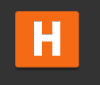
<style>
.page{position:relative;width:100px;height:85px;background:#333333}
.page>*{position:absolute;margin:0}
.t1{font:50.4px "MyriadPro-Bold";letter-spacing:-0.015em;color:#ffffff;font-weight:bold;scale:0.89 1}
</style>
<div class="page">
<p class="t1" style="left:34px;top:21px;width:27px;height:35px">H</p>
</div>
